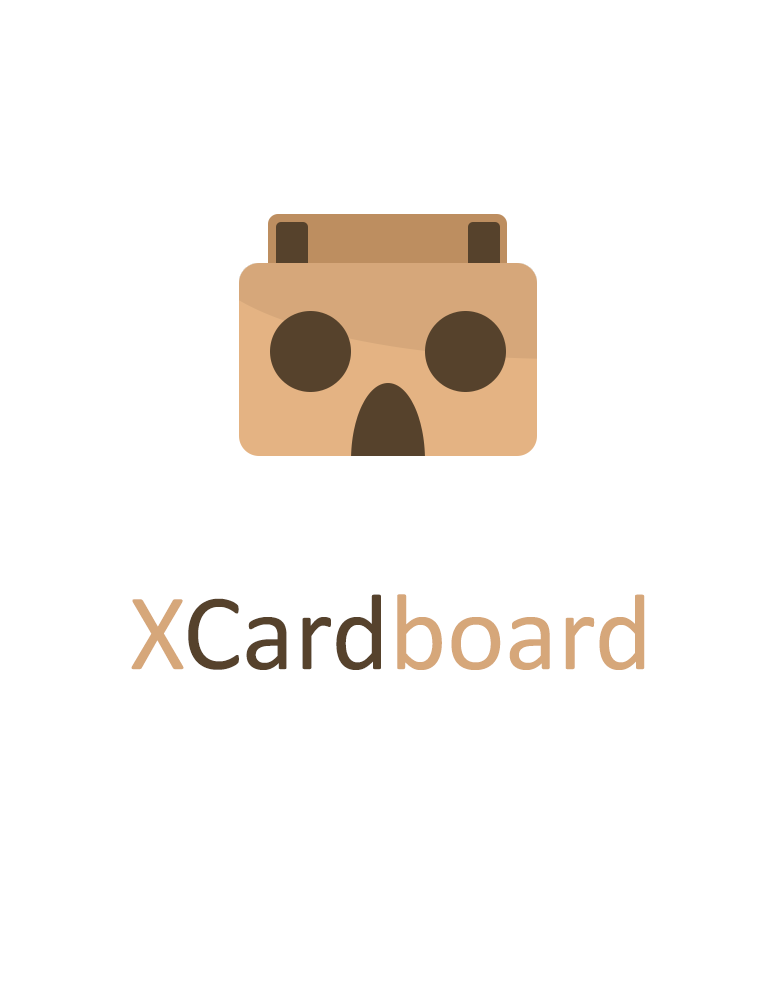
<style>
.page{position:relative;width:768px;height:1004px;background:#ffffff}
.page>*{position:absolute;margin:0}
.t1{font:110px "Calibri";color:#d6a77a}
.t2{font:110px "Calibri";color:#56422c}
</style>
<div class="page">
<p class="t1" style="left:131px;top:594px;width:514px;height:76px">X<span class="t2">Card</span>board</p>
</div>
